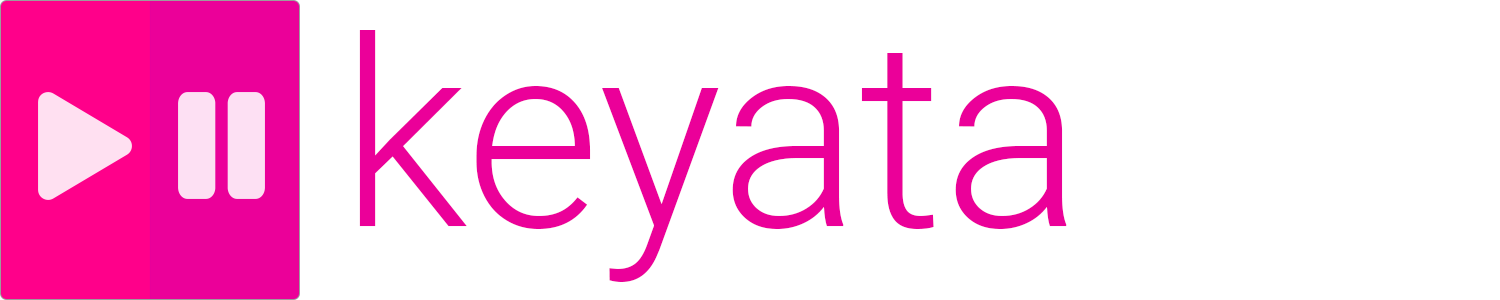
<style>
.page{position:relative;width:1500px;height:300px;background:#ffffff}
.page>*{position:absolute;margin:0}
.t1{font:260.6px "Roboto-Light";color:#eb0099}
</style>
<div class="page">
<p class="t1" style="left:359px;top:30px;width:708px;height:252px">keyata</p>
</div>
